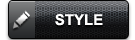
<style>
.page{position:relative;width:135px;height:40px}
.page>*{position:absolute;margin:0}
.t1{font:15px "Arial-BoldMT";color:#ffffff;text-transform:uppercase}
</style>
<div class="page">
<p class="t1" style="left:55px;top:14px;width:48px;height:12px">Style</p>
</div>
